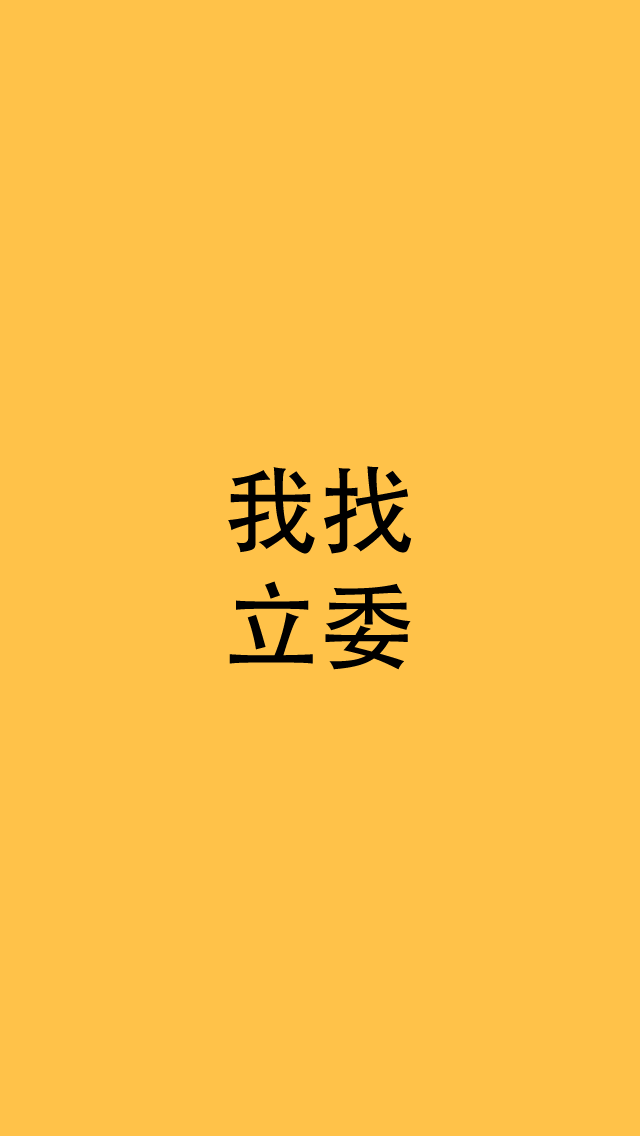
<style>
.page{position:relative;width:640px;height:1136px;background:#ffc249}
.page>*{position:absolute;margin:0}
.t1{font:96px "AdobeHeitiStd-Regular";color:#000000}
</style>
<div class="page">
<p class="t1" style="left:228px;top:466px;width:184px;height:204px">我找<br>立委</p>
</div>
